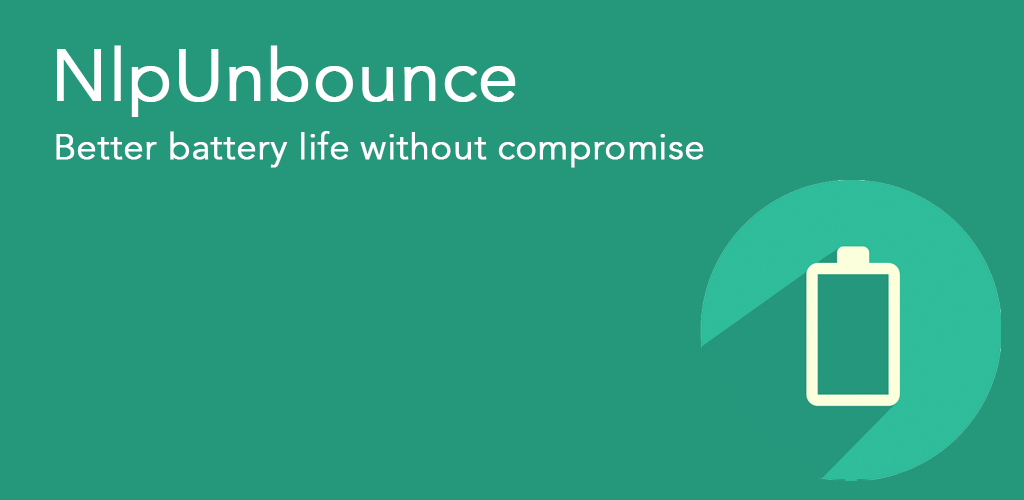
<style>
.page{position:relative;width:1024px;height:500px;background:#25987c}
.page>*{position:absolute;margin:0}
.t1{font:72px "Avenir-Light";color:#ffffff;font-weight:bold}
.t2{font:36px "Avenir-Light";color:#ffffff;font-weight:bold}
</style>
<div class="page">
<p class="t1" style="left:57px;top:45px;width:459px;height:72px">NlpUnbounce</p>
<p class="t2" style="left:56px;top:131px;width:648px;height:37px">Better battery life without compromise</p>
</div>
